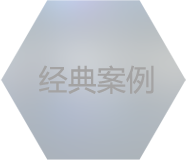
<style>
.page{position:relative;width:186px;height:160px;background:#ffffff}
.page>*{position:absolute;margin:0}
.t1{font:29.2px "MicrosoftYaHei";color:#a4a3a3}
</style>
<div class="page">
<p class="t1" style="left:39px;top:65px;width:115px;height:29px">经典案例</p>
</div>
